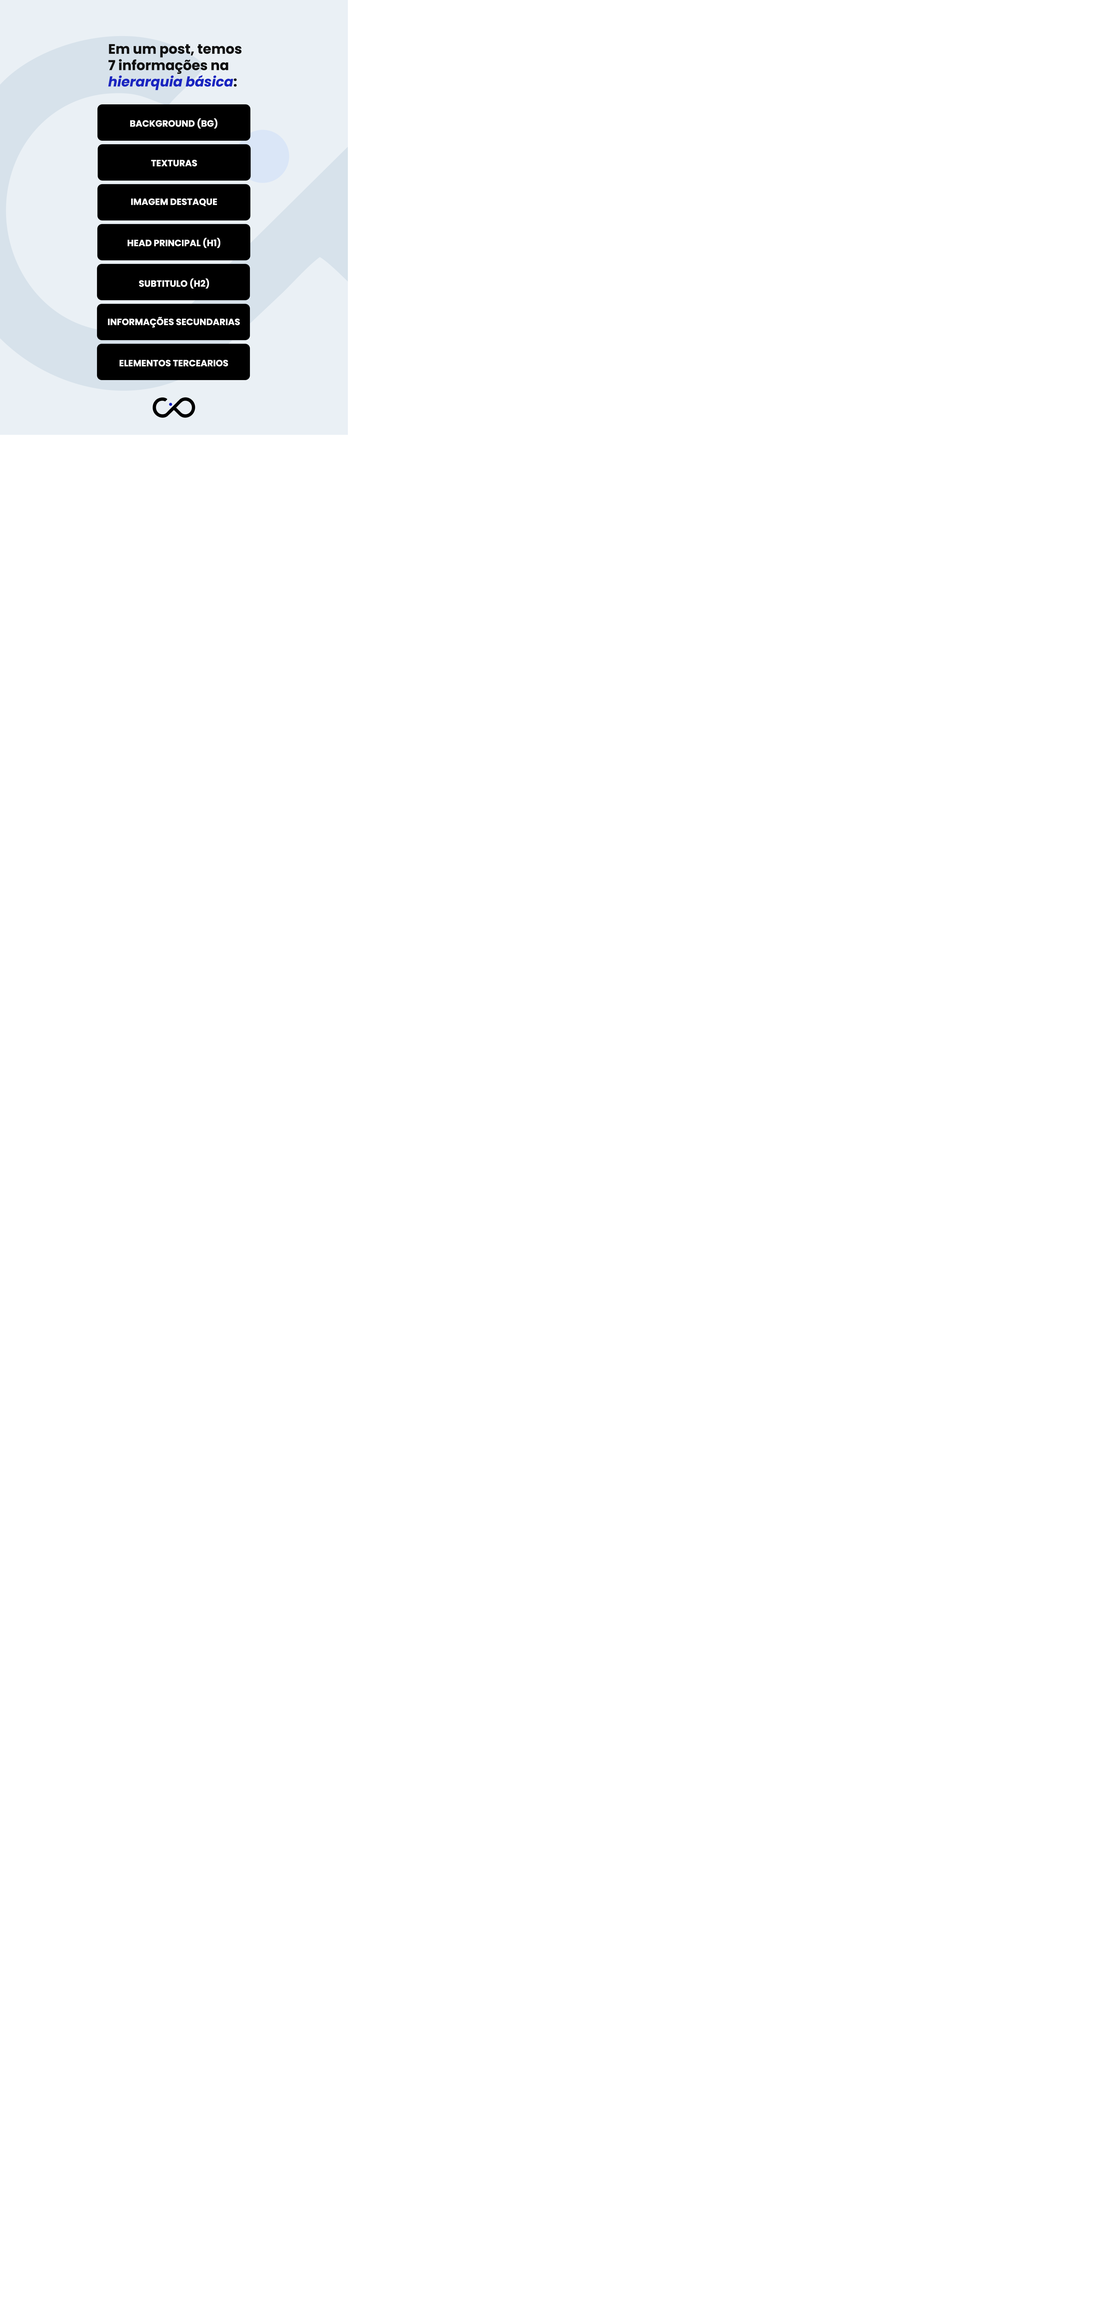
<style>
.page{position:relative;width:1108px;height:2303px;background:#ffffff}
.page>*{position:absolute;margin:0}
.t1{font:13.6px "Poppins-Bold";color:#111111}
.t2{font:13.6px "Poppins-BoldItalic";color:#1a25c0}
.t3{font:9px "Poppins-Bold";color:#ffffff;text-transform:uppercase}
</style>
<div class="page">
<p class="t1" style="left:108px;top:44px;width:134px;height:46px">Em um post, temos<br>7 informações na<br><span class="t2">hierarquia básica</span>:</p>
<p class="t3" style="left:130px;top:118px;width:87px;height:11px">Background (BG)</p>
<p class="t3" style="left:151px;top:160px;width:46px;height:7px">Texturas</p>
<p class="t3" style="left:131px;top:198px;width:86px;height:8px">Imagem Destaque</p>
<p class="t3" style="left:128px;top:238px;width:92px;height:10px">Head Principal (H1)</p>
<p class="t3" style="left:139px;top:278px;width:70px;height:11px">Subtitulo (H2)</p>
<p class="t3" style="left:108px;top:317px;width:132px;height:11px">Informações Secundarias</p>
<p class="t3" style="left:120px;top:360px;width:108px;height:7px">Elementos Tercearios</p>
</div>
